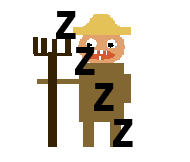
<style>
.page{position:relative;width:190px;height:162px;background:#ffffff}
.page>*{position:absolute;margin:0}
.t1{font:39px "Arial-Black";color:#000000;scale:0.73 1}
</style>
<div class="page">
<p class="t1" style="left:56px;top:11px;width:77px;height:136px">Z<br>  Z<br>    Z<br>      Z</p>
</div>
